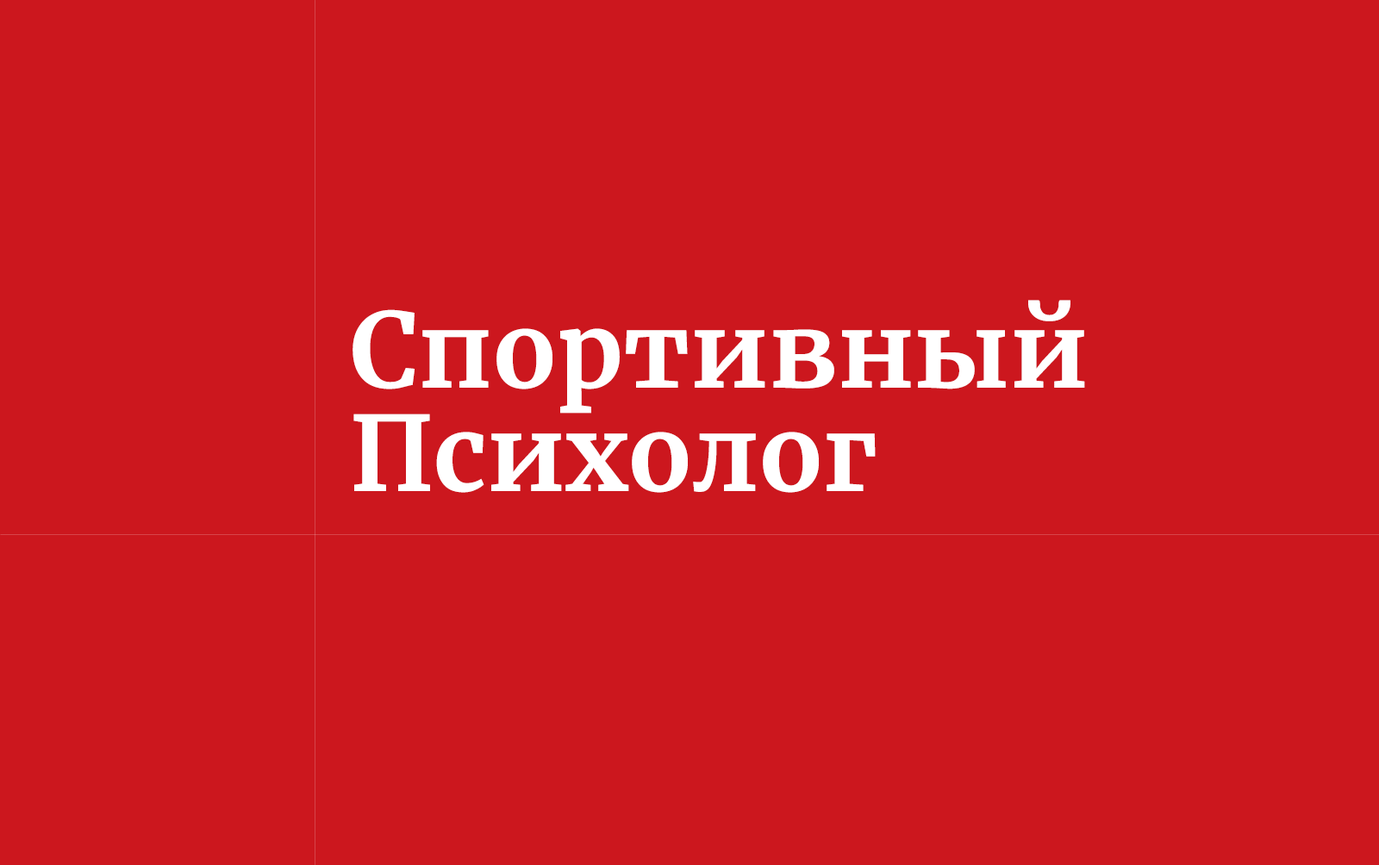
<style>
.page{position:relative;width:1379px;height:865px;background:#cc171e}
.page>*{position:absolute;margin:0}
.t1{font:103.4px/103.4px "Merriweather-Bold";color:#ffffff}
</style>
<div class="page">
<p class="t1" style="left:352px;top:300px;width:733px;height:193px">Спортивный<br>Психолог</p>
</div>
